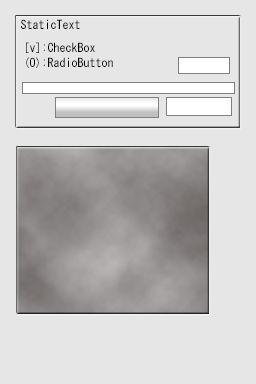
<style>
.page{position:relative;width:256px;height:384px;background:#e6e6e6}
.page>*{position:absolute;margin:0}
.t1{font:12px "MS-Gothic";color:#000000}
</style>
<div class="page">
<p class="t1" style="left:21px;top:19px;width:59px;height:10px">StaticText</p>
<p class="t1" style="left:26px;top:42px;width:69px;height:11px">[v]:CheckBox</p>
<p class="t1" style="left:26px;top:57px;width:87px;height:11px">(O):RadioButton</p>
</div>
